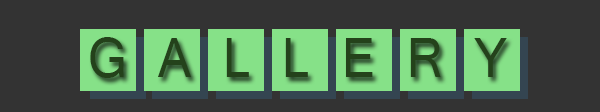
<style>
.page{position:relative;width:600px;height:112px;background:#333333}
.page>*{position:absolute;margin:0}
.t1{font:60px "Latha";color:#24421b;scale:0.92 1}
</style>
<div class="page">
<p class="t1" style="left:90px;top:37px;width:417px;height:41px">G A L L E R Y</p>
</div>
